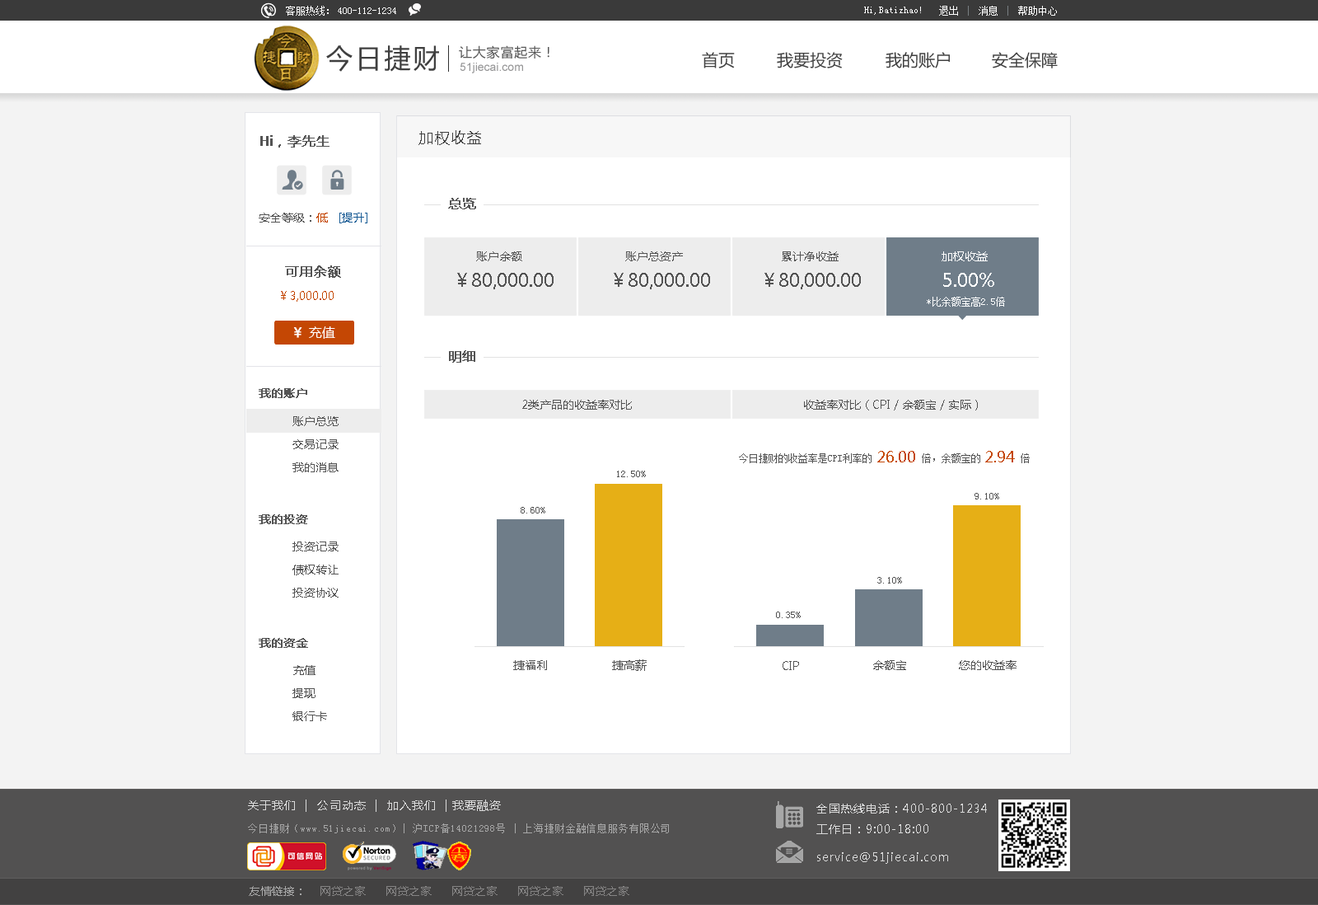
<style>
.page{position:relative;width:1318px;height:905px;background:#ffffff}
.page>*{position:absolute;margin:0}
.t1{font:9.9px "SimSun";color:#ffffff}
.t2{font:26.4px "MicrosoftYaHei";letter-spacing:0.1em;color:#3f3f3f}
.t3{font:13.2px "MicrosoftYaHei";letter-spacing:0.05em;color:#575757}
.t4{font:16.5px "MicrosoftYaHei";color:#414141}
.t5{font:11.5px "ArialMT";color:#969697}
.t6{font:13.2px "MicrosoftYaHei";color:#545454;font-weight:bold}
.t7{font:14.8px "MicrosoftYaHei";letter-spacing:0.1em;color:#3f3f3f}
.t8{font:11.5px "MicrosoftYaHei";color:#545454}
.t9{font:11.5px "MicrosoftYaHei";color:#c44704}
.t10{font:11.5px "MicrosoftYaHei";color:#175a94}
.t11{font:11.5px "MicrosoftYaHei";color:#ffffff}
.t12{font:18.1px "MicrosoftYaHei";color:#545454}
.t13{font:18.1px "MicrosoftYaHei";color:#ffffff}
.t14{font:11.5px "MicrosoftYaHei";color:#c44703}
.t15{font:13.2px "MicrosoftYaHei";color:#ffffff}
.t16{font:13.2px "MicrosoftYaHei";color:#ffffff;font-weight:bold}
.t17{font:11.5px "MicrosoftYaHei";color:#545454;font-weight:bold}
.t18{font:11.5px/23.1px "MicrosoftYaHei";color:#545454}
.t19{font:9.9px "SimSun";color:#545454}
.t20{font:14.8px "MicrosoftYaHei";color:#c44704}
.t21{font:11.5px "MicrosoftYaHei";letter-spacing:0.07em;color:#dbdbdb}
.t22{font:11.5px "MicrosoftYaHei";letter-spacing:0.07em;color:#dadada}
.t23{font:9.9px "SimSun";letter-spacing:0.07em;color:#a7a7a7}
.t24{font:11.5px "MicrosoftYaHei";color:#858484}
.t25{font:11.5px "MicrosoftYaHei";color:#a7a7a7}
</style>
<div class="page">
<p class="t1" style="left:286px;top:6px;width:43px;height:10px">客服热线：</p>
<p class="t1" style="left:939px;top:6px;width:118px;height:10px">退出    消息    帮助中心</p>
<p class="t1" style="left:338px;top:7px;width:58px;height:7px">400-112-1234</p>
<p class="t1" style="left:864px;top:7px;width:57px;height:8px">Hi,Batizhao!</p>
<p class="t2" style="left:326px;top:45px;width:113px;height:27px">今日捷财</p>
<p class="t3" style="left:459px;top:45px;width:91px;height:13px">让大家富起来！</p>
<p class="t4" style="left:702px;top:52px;width:33px;height:16px">首页</p>
<p class="t4" style="left:777px;top:52px;width:66px;height:16px">我要投资</p>
<p class="t4" style="left:886px;top:52px;width:64px;height:16px">我的账户</p>
<p class="t4" style="left:992px;top:52px;width:66px;height:16px">安全保障</p>
<p class="t5" style="left:460px;top:63px;width:63px;height:10px">51jiecai.com</p>
<p class="t6" style="left:260px;top:135px;width:70px;height:12px">Hi，李先生</p>
<p class="t7" style="left:419px;top:130px;width:62px;height:15px">加权收益</p>
<p class="t6" style="left:448px;top:198px;width:28px;height:11px">总览</p>
<p class="t8" style="left:259px;top:213px;width:108px;height:10px">安全等级：<span class="t9">低   </span><span class="t10">[提升]</span></p>
<p class="t8" style="left:476px;top:251px;width:46px;height:10px">账户余额</p>
<p class="t8" style="left:625px;top:251px;width:58px;height:10px">账户总资产</p>
<p class="t8" style="left:782px;top:251px;width:57px;height:10px">累计净收益</p>
<p class="t11" style="left:942px;top:251px;width:46px;height:10px">加权收益</p>
<p class="t6" style="left:285px;top:265px;width:56px;height:13px">可用余额</p>
<p class="t12" style="left:457px;top:273px;width:97px;height:16px">￥80,000.00</p>
<p class="t12" style="left:614px;top:273px;width:96px;height:16px">￥80,000.00</p>
<p class="t12" style="left:765px;top:273px;width:96px;height:16px">￥80,000.00</p>
<p class="t13" style="left:943px;top:273px;width:51px;height:14px">5.00%</p>
<p class="t14" style="left:281px;top:291px;width:53px;height:11px">￥3,000.00</p>
<p class="t1" style="left:927px;top:297px;width:78px;height:9px">*比余额宝高2.5倍</p>
<p class="t15" style="left:293px;top:326px;width:42px;height:13px"><span class="t16">￥ </span>充值</p>
<p class="t6" style="left:449px;top:350px;width:26px;height:13px">明细</p>
<p class="t17" style="left:259px;top:388px;width:48px;height:10px">我的账户</p>
<p class="t8" style="left:522px;top:400px;width:110px;height:9px">2类产品的收益率对比</p>
<p class="t8" style="left:804px;top:400px;width:174px;height:10px">收益率对比（CPI / 余额宝 / 实际）</p>
<p class="t18" style="left:292px;top:416px;width:47px;height:56px">账户总览<br>交易记录<br>我的消息</p>
<p class="t19" style="left:739px;top:453px;width:291px;height:10px">今日捷财的收益率是CPI利率的          倍，余额宝的        倍</p>
<p class="t20" style="left:877px;top:451px;width:38px;height:11px">26.00</p>
<p class="t20" style="left:985px;top:451px;width:30px;height:11px">2.94</p>
<p class="t19" style="left:617px;top:470px;width:29px;height:7px">12.50%</p>
<p class="t19" style="left:975px;top:493px;width:24px;height:6px">9.10%</p>
<p class="t19" style="left:521px;top:507px;width:24px;height:6px">8.60%</p>
<p class="t17" style="left:259px;top:514px;width:49px;height:10px">我的投资</p>
<p class="t18" style="left:292px;top:541px;width:47px;height:56px">投资记录<br>债权转让<br>投资协议</p>
<p class="t19" style="left:877px;top:577px;width:25px;height:6px">3.10%</p>
<p class="t19" style="left:776px;top:611px;width:25px;height:7px">0.35%</p>
<p class="t17" style="left:259px;top:638px;width:49px;height:10px">我的资金</p>
<p class="t18" style="left:292px;top:665px;width:35px;height:56px">充值<br>提现<br>银行卡</p>
<p class="t8" style="left:513px;top:660px;width:34px;height:10px">捷福利</p>
<p class="t8" style="left:612px;top:659px;width:35px;height:12px">捷高薪</p>
<p class="t8" style="left:783px;top:661px;width:16px;height:9px">CIP</p>
<p class="t8" style="left:873px;top:660px;width:33px;height:10px">余额宝</p>
<p class="t8" style="left:959px;top:660px;width:58px;height:10px">您的收益率</p>
<p class="t21" style="left:248px;top:799px;width:253px;height:13px">关于我们  |  公司动态  |  加入我们  | 我要融资</p>
<p class="t22" style="left:816px;top:803px;width:171px;height:31px">全国热线电话：400-800-1234<br>工作日：9:00-18:00</p>
<p class="t23" style="left:248px;top:823px;width:421px;height:10px">今日捷财（www.51jiecai.com）| 沪ICP备14021298号 | 上海捷财金融信息服务有限公司</p>
<p class="t22" style="left:817px;top:852px;width:131px;height:11px">service@51jiecai.com</p>
<p class="t24" style="left:249px;top:886px;width:380px;height:10px"><span class="t25">友情链接：</span>    网贷之家      网贷之家      网贷之家      网贷之家      网贷之家</p>
</div>
